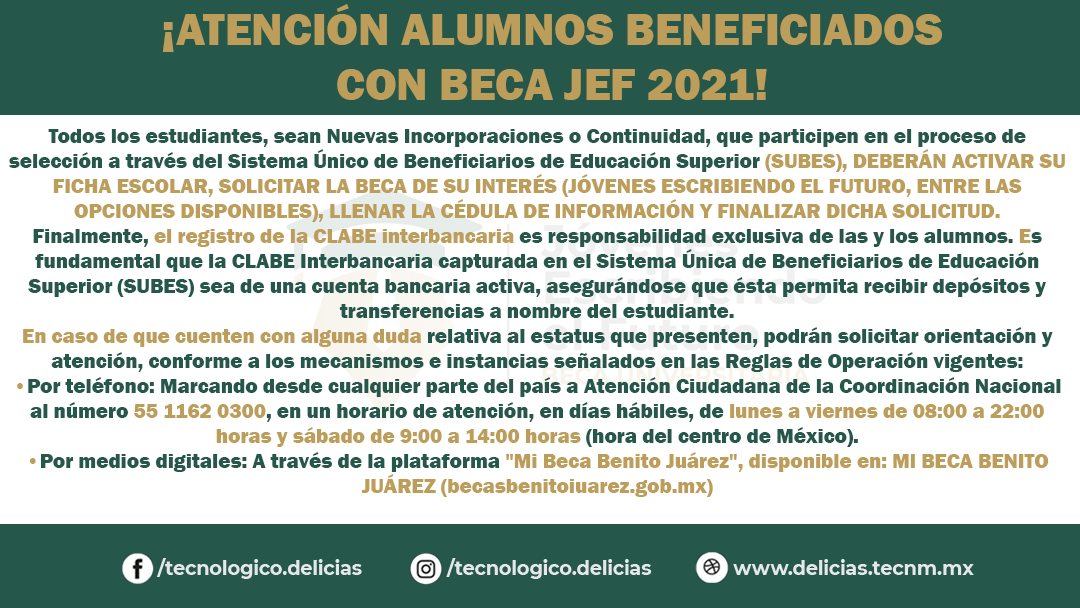
<style>
.page{position:relative;width:1080px;height:608px;background:#ffffff}
.page>*{position:absolute;margin:0}
.t1{font:45.8px "FranklinGothic-Heavy";color:#bd9d5a}
.t2{font:20.8px "FranklinGothic-Heavy";color:#25574b}
.t3{font:20.8px "FranklinGothic-Heavy";color:#bd9d5a}
.t4{font:19.5px "Montserrat-Bold";color:#e6e7e9}
</style>
<div class="page">
<p class="t1" style="left:162px;top:4px;width:780px;height:96px;text-align:center">¡ATENCIÓN ALUMNOS BENEFICIADOS <br>CON BECA JEF 2021!</p>
<p class="t2" style="left:9px;top:129px;width:1056px;height:368px;text-align:center">Todos los estudiantes, sean Nuevas Incorporaciones o Continuidad, que participen en el proceso de selección a través del Sistema Único de Beneficiarios de Educación Superior <span class="t3">(SUBES), DEBERÁN ACTIVAR SU FICHA ESCOLAR, SOLICITAR LA BECA DE SU INTERÉS (JÓVENES ESCRIBIENDO EL FUTURO, ENTRE LAS OPCIONES DISPONIBLES), LLENAR LA CÉDULA DE INFORMACIÓN Y FINALIZAR DICHA SOLICITUD.<br></span>Finalmente,<span class="t3"> el registro de la CLABE interbancaria </span>es responsabilidad exclusiva de las y los alumnos. <span class="t3">E</span>s fundamental que la CLABE Interbancaria capturada en el Sistema Única de Beneficiarios de Educación Superior (SUBES) sea de una cuenta bancaria activa, asegurándose que ésta permita recibir depósitos y transferencias a nombre del estudiante.<br><span class="t3">En caso de que cuenten con alguna duda </span>relativa al estatus que presenten, podrán solicitar orientación y atención, conforme a los mecanismos e instancias señalados en las Reglas de Operación vigentes:<br><span class="t3">•</span>Por teléfono: Marcando desde cualquier parte del país a Atención Ciudadana de la Coordinación Nacional al número <span class="t3">55 1162 0300</span>, en un horario de atención, en días hábiles, de<span class="t3"> lunes a viernes de 08:00 a 22:00 horas y sábado de 9:00 a 14:00 horas </span>(hora del centro de México).<br><span class="t3">•</span>Por medios digitales: A través de la plataforma <span class="t3">"Mi Beca Benito Juárez", disponible en: Ml BECA BENITO JUÁREZ (becasbenitoiuarez.gob.mx)</span></p>
<p class="t4" style="left:156px;top:558px;width:206px;height:21px">/tecnologico.delicias</p>
<p class="t4" style="left:446px;top:558px;width:206px;height:21px">/tecnologico.delicias</p>
<p class="t4" style="left:733px;top:559px;width:241px;height:16px">www.delicias.tecnm.mx</p>
</div>
